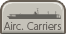
<style>
.page{position:relative;width:66px;height:34px;background:#c5c2b9}
.page>*{position:absolute;margin:0}
.t1{font:10px "UDShinGoPro-Light";color:#6a6560;scale:0.9 1}
</style>
<div class="page">
<p class="t1" style="left:4px;top:22px;width:58px;height:8px">Airc. Carriers</p>
</div>
